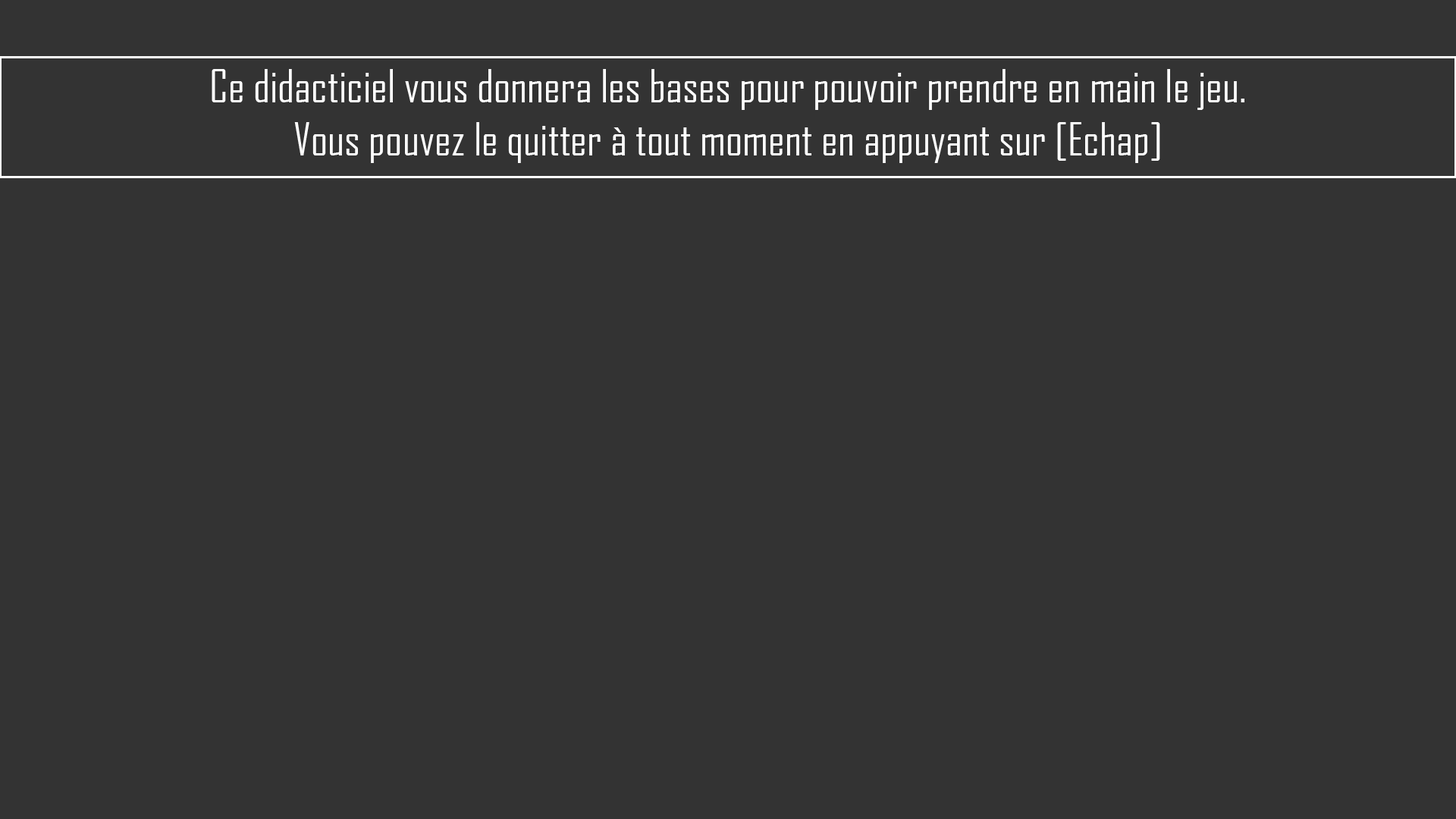
<style>
.page{position:relative;width:1456px;height:819px;background:#333333}
.page>*{position:absolute;margin:0}
.t1{font:44.2px "AgencyFB-Reg";color:#ffffff}
</style>
<div class="page">
<p class="t1" style="left:212px;top:69px;width:1032px;height:94px;text-align:center">Ce didacticiel vous donnera les bases pour pouvoir prendre en main le jeu.<br>Vous pouvez le quitter à tout moment en appuyant sur [Echap]</p>
</div>
